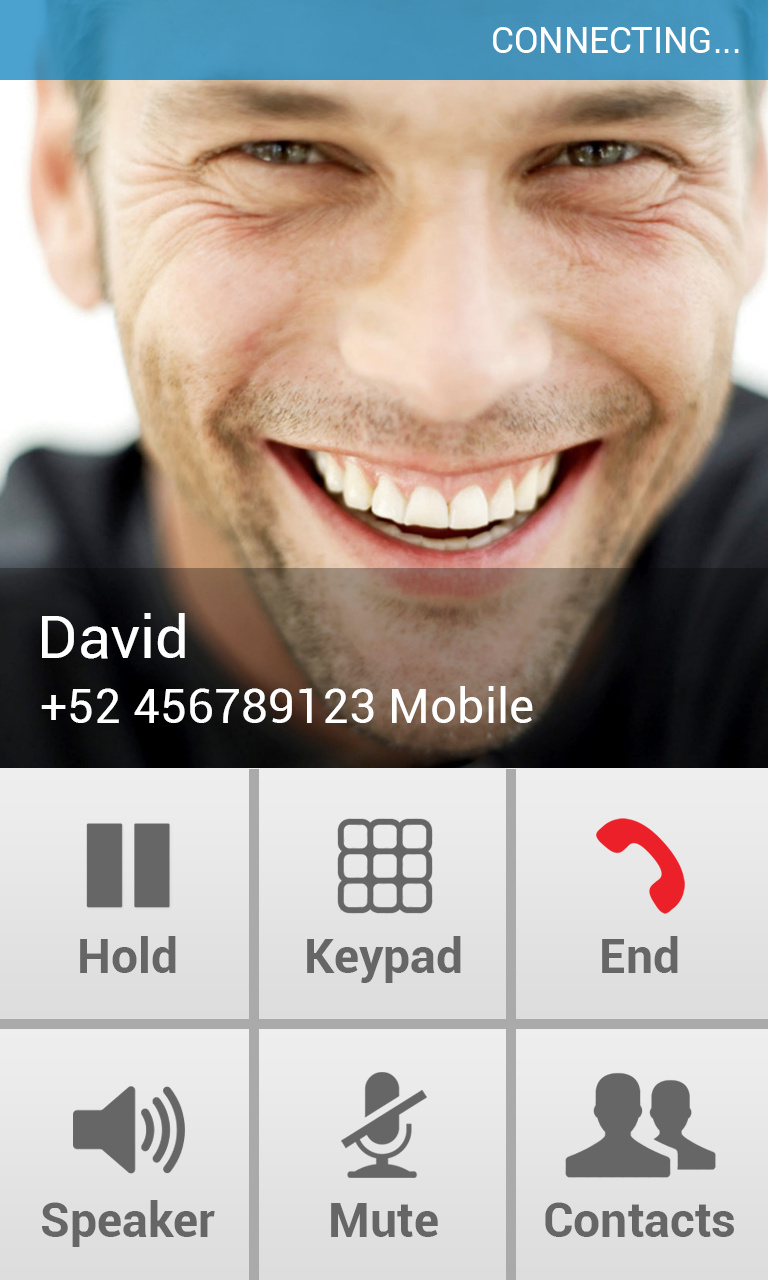
<style>
.page{position:relative;width:768px;height:1280px}
.page>*{position:absolute;margin:0}
.t1{font:36px "Roboto-Regular";color:#ffffff}
.t2{font:60px "Roboto-Regular";color:#ffffff}
.t3{font:48px "Roboto-Regular";color:#ffffff}
.t4{font:48px "Roboto-Bold";color:#666666}
</style>
<div class="page">
<p class="t1" style="left:493px;top:27px;width:246px;height:26px">CONNECTING...</p>
<p class="t2" style="left:42px;top:613px;width:143px;height:46px">David</p>
<p class="t3" style="left:41px;top:686px;width:492px;height:37px">+52 456789123 Mobile</p>
<p class="t4" style="left:80px;top:936px;width:96px;height:37px">Hold</p>
<p class="t4" style="left:307px;top:936px;width:154px;height:47px">Keypad</p>
<p class="t4" style="left:602px;top:936px;width:76px;height:37px">End</p>
<p class="t4" style="left:42px;top:1200px;width:173px;height:47px">Speaker</p>
<p class="t4" style="left:331px;top:1203px;width:107px;height:34px">Mute</p>
<p class="t4" style="left:545px;top:1202px;width:189px;height:35px">Contacts</p>
</div>
